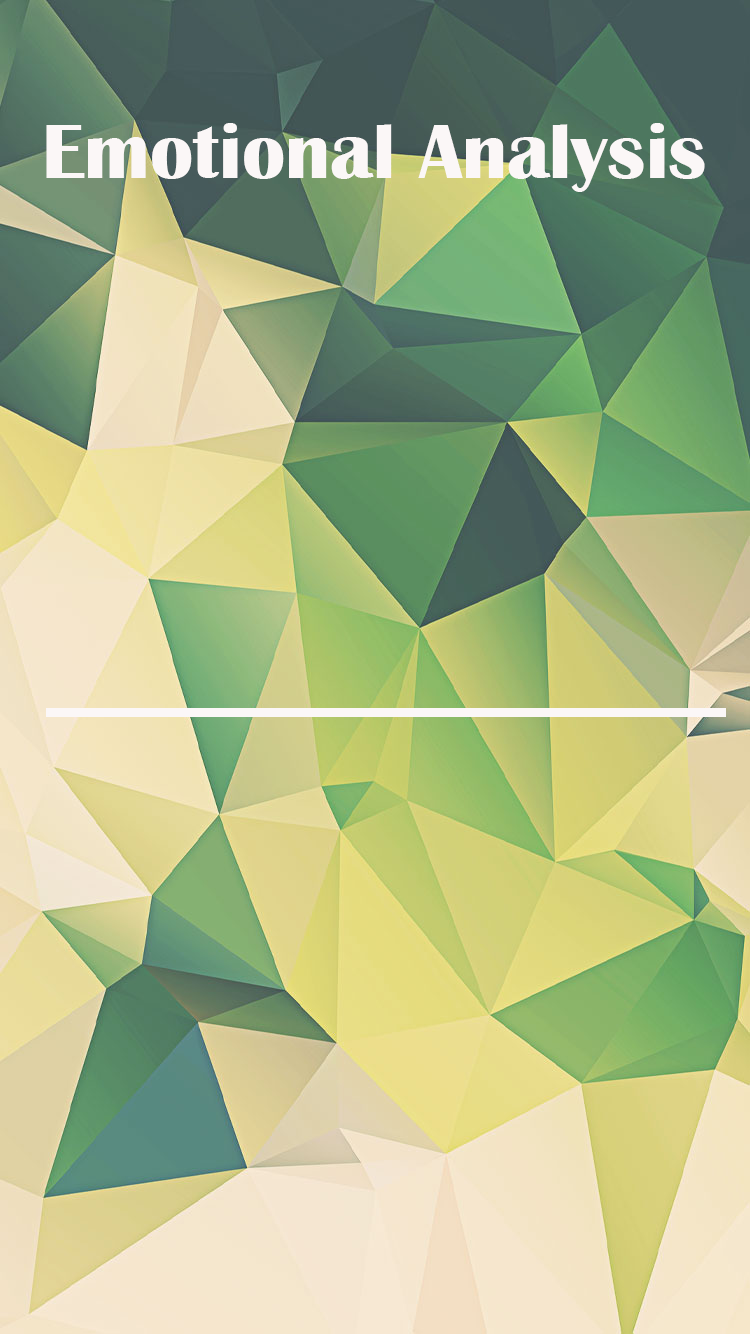
<style>
.page{position:relative;width:750px;height:1334px}
.page>*{position:absolute;margin:0}
.t1{font:80px "BritannicBold";color:#fbf7f7}
</style>
<div class="page">
<p class="t1" style="left:46px;top:123px;width:659px;height:69px">Emotional Analysis</p>
</div>
